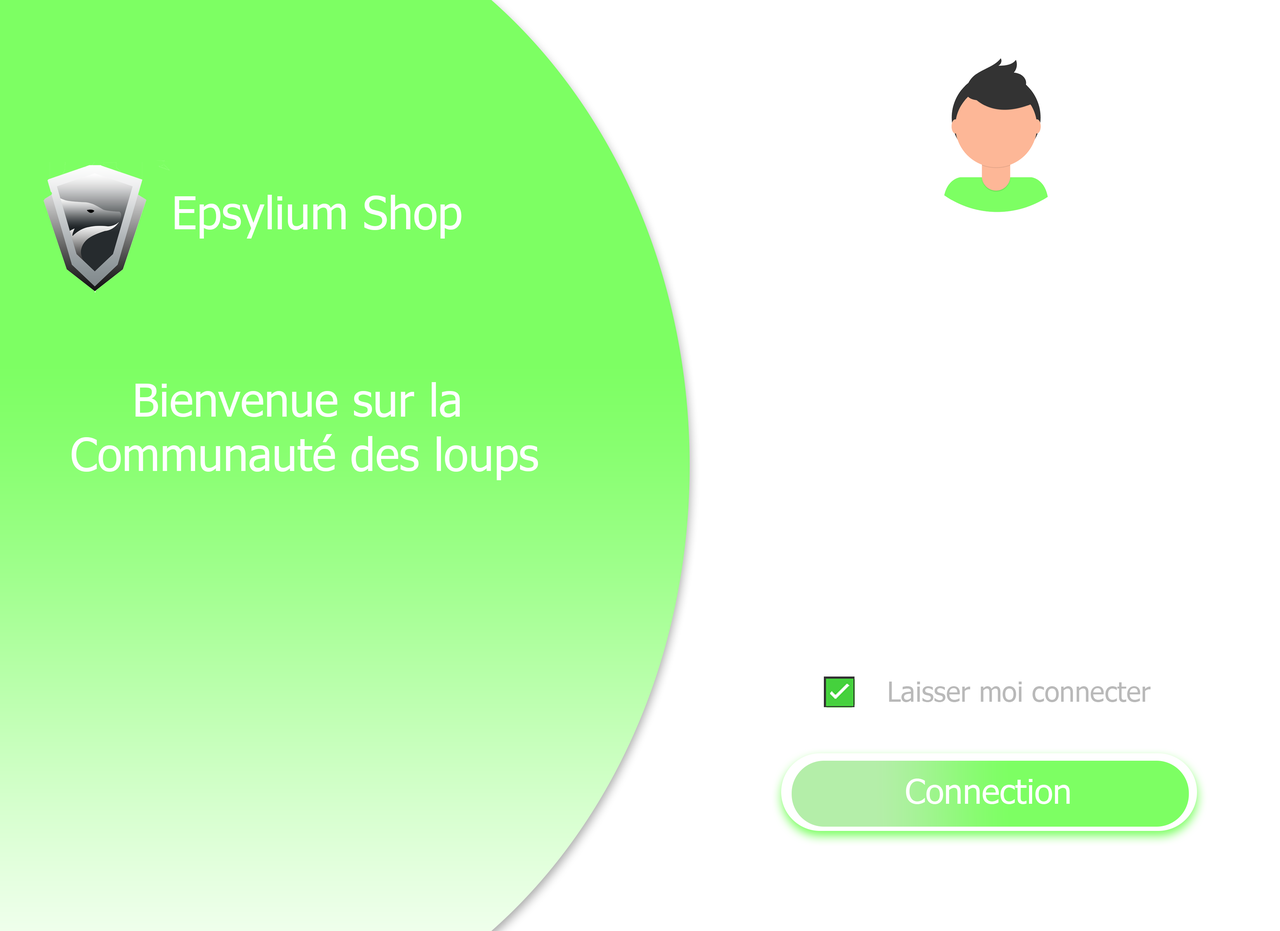
<style>
.page{position:relative;width:1280px;height:931px;background:#ffffff}
.page>*{position:absolute;margin:0}
.t1{font:45.3px "Tahoma";color:#ffffff}
.t2{font:27.5px "Tahoma";color:#b9b9b9}
.t3{font:34px "Tahoma";color:#ffffff}
</style>
<div class="page">
<p class="t1" style="left:175px;top:195px;width:287px;height:44px">Epsylium Shop</p>
<p class="t1" style="left:71px;top:382px;width:467px;height:98px;text-align:center">Bienvenue sur la <br>Communauté des loups</p>
<p class="t2" style="left:889px;top:682px;width:262px;height:20px">Laisser moi connecter</p>
<p class="t3" style="left:906px;top:779px;width:164px;height:25px">Connection</p>
</div>
